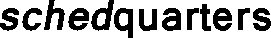
<style>
.page{position:relative;width:271px;height:38px;background:#ffffff}
.page>*{position:absolute;margin:0}
.t1{font:45.8px "Vrinda-Bold";color:#000000}
.t2{font:45.8px "Vrinda-Bold";color:#000000;font-style:italic}
</style>
<div class="page">
<p class="t1" style="left:0px;top:0px;width:271px;height:38px"><span class="t2">sched</span>quarters</p>
</div>
